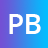
<style>
.page{position:relative;width:48px;height:48px}
.page>*{position:absolute;margin:0}
.t1{font:28px "OpenSans-Semibold";letter-spacing:-0.025em;color:#ffffff}
</style>
<div class="page">
<p class="t1" style="left:9px;top:14px;width:32px;height:20px">PB</p>
</div>
